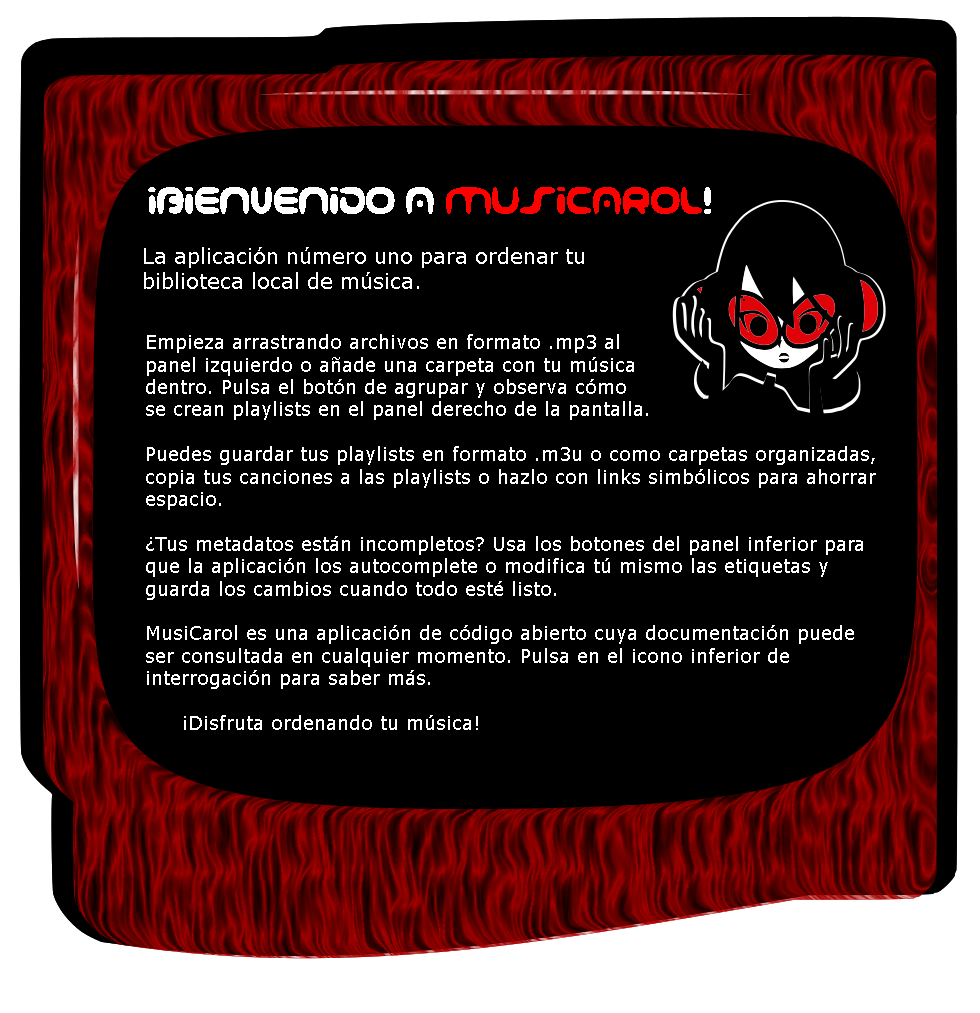
<style>
.page{position:relative;width:980px;height:1013px;background:#000000}
.page>*{position:absolute;margin:0}
.t1{font:37.3px "001_Interstellar_Log";color:#ffffff}
.t2{font:37.3px "001_Interstellar_Log";color:#ff0000}
.t3{font:21.3px "MSReferenceSansSerif";color:#ffffff}
.t4{font:18.7px "MSReferenceSansSerif";color:#ffffff}
</style>
<div class="page">
<p class="t1" style="left:148px;top:187px;width:563px;height:27px">¡Bienvenido a <span class="t2">MusiCarol</span>!</p>
<p class="t3" style="left:144px;top:247px;width:440px;height:42px">La aplicación número uno para ordenar tu <br>biblioteca local de música.</p>
<p class="t4" style="left:146px;top:334px;width:730px;height:396px">Empieza arrastrando archivos en formato .mp3 al <br>panel izquierdo o añade una carpeta con tu música<br>dentro. Pulsa el botón de agrupar y observa cómo<br>se crean playlists en el panel derecho de la pantalla.<br><br>Puedes guardar tus playlists en formato .m3u o como carpetas organizadas,<br>copia tus canciones a las playlists o hazlo con links simbólicos para ahorrar<br>espacio.<br><br>¿Tus metadatos están incompletos? Usa los botones del panel inferior para<br>que la aplicación los autocomplete o modifica tú mismo las etiquetas y <br>guarda los cambios cuando todo esté listo.<br><br>MusiCarol es una aplicación de código abierto cuya documentación puede<br>ser consultada en cualquier momento. Pulsa en el icono inferior de<br>interrogación para saber más.<br><br> ¡Disfruta ordenando tu música!</p>
</div>
